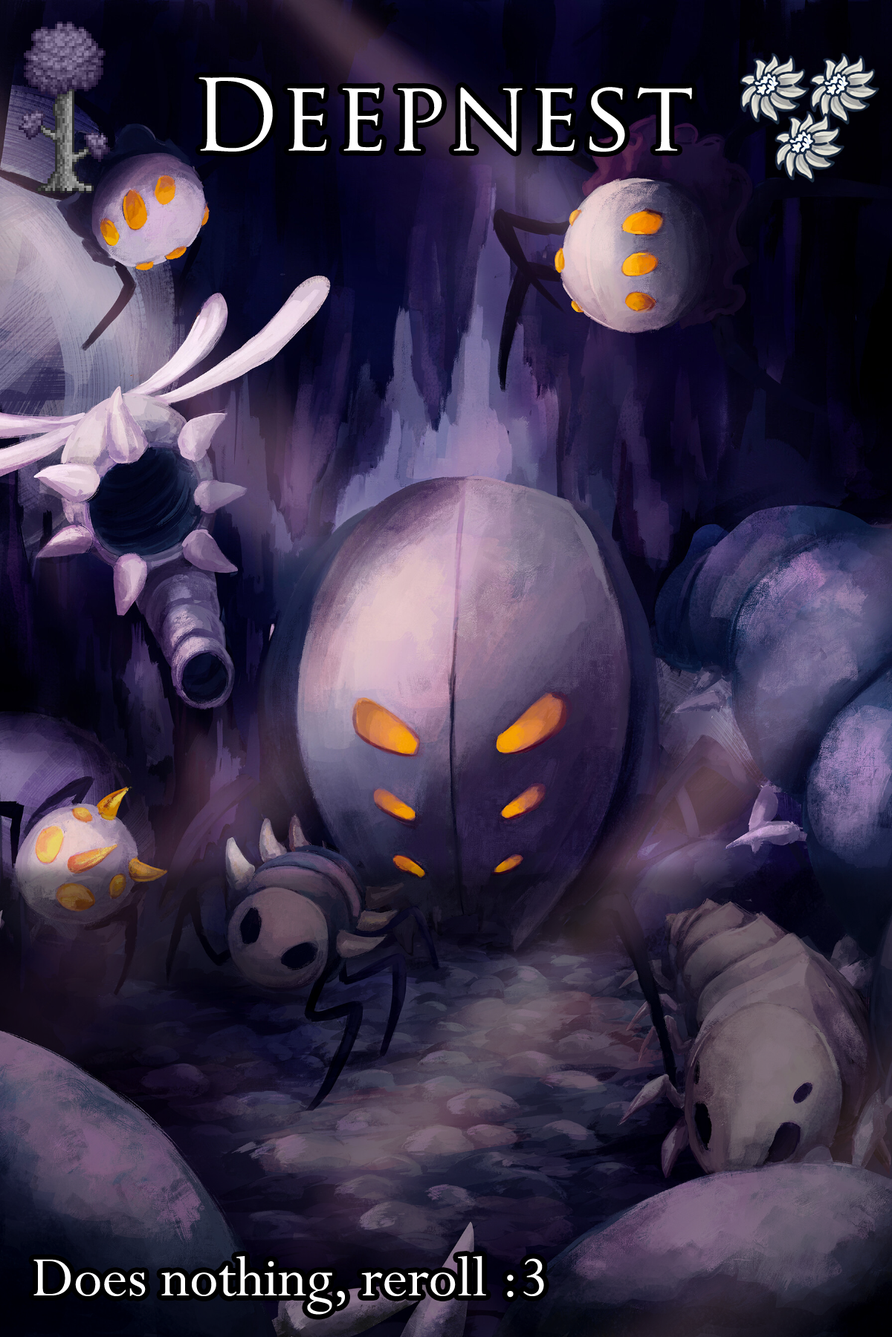
<style>
.page{position:relative;width:892px;height:1337px}
.page>*{position:absolute;margin:0}
.t1{font:165.7px "TrajanPro-Regular";letter-spacing:0.02em;color:#ffffff}
.t2{font:107px "Perpetua";color:#ffffff}
</style>
<div class="page">
<p class="t1" style="left:198px;top:77px;width:494px;height:75px">Deepnest</p>
<p class="t2" style="left:33px;top:1256px;width:511px;height:59px">Does nothing, reroll :3</p>
</div>
